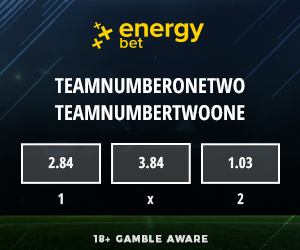
<style>
.page{position:relative;width:300px;height:250px}
.page>*{position:absolute;margin:0}
.t1{font:20.9px "OpenSansCondensed-Bold";color:#ffffff}
.t2{font:15.1px "OpenSansCondensed-Bold";color:#ffffff}
.t3{font:15.3px "OpenSansCondensed-Bold";color:#ffffff}
.t4{font:14.7px "OpenSansCondensed-Bold";color:#ffffff}
</style>
<div class="page">
<p class="t1" style="left:55px;top:78px;width:190px;height:16px">TEAMNUMBERONETWO</p>
<p class="t1" style="left:55px;top:105px;width:190px;height:16px">TEAMNUMBERTWOONE</p>
<p class="t2" style="left:48px;top:157px;width:26px;height:12px">2.84</p>
<p class="t3" style="left:138px;top:156px;width:26px;height:13px">3.84</p>
<p class="t2" style="left:228px;top:157px;width:25px;height:12px">1.03</p>
<p class="t4" style="left:58px;top:193px;width:5px;height:12px;opacity:0.9">1</p>
<p class="t4" style="left:147px;top:195px;width:7px;height:10px;opacity:0.9">x</p>
<p class="t4" style="left:237px;top:193px;width:7px;height:12px;opacity:0.9">2</p>
</div>
